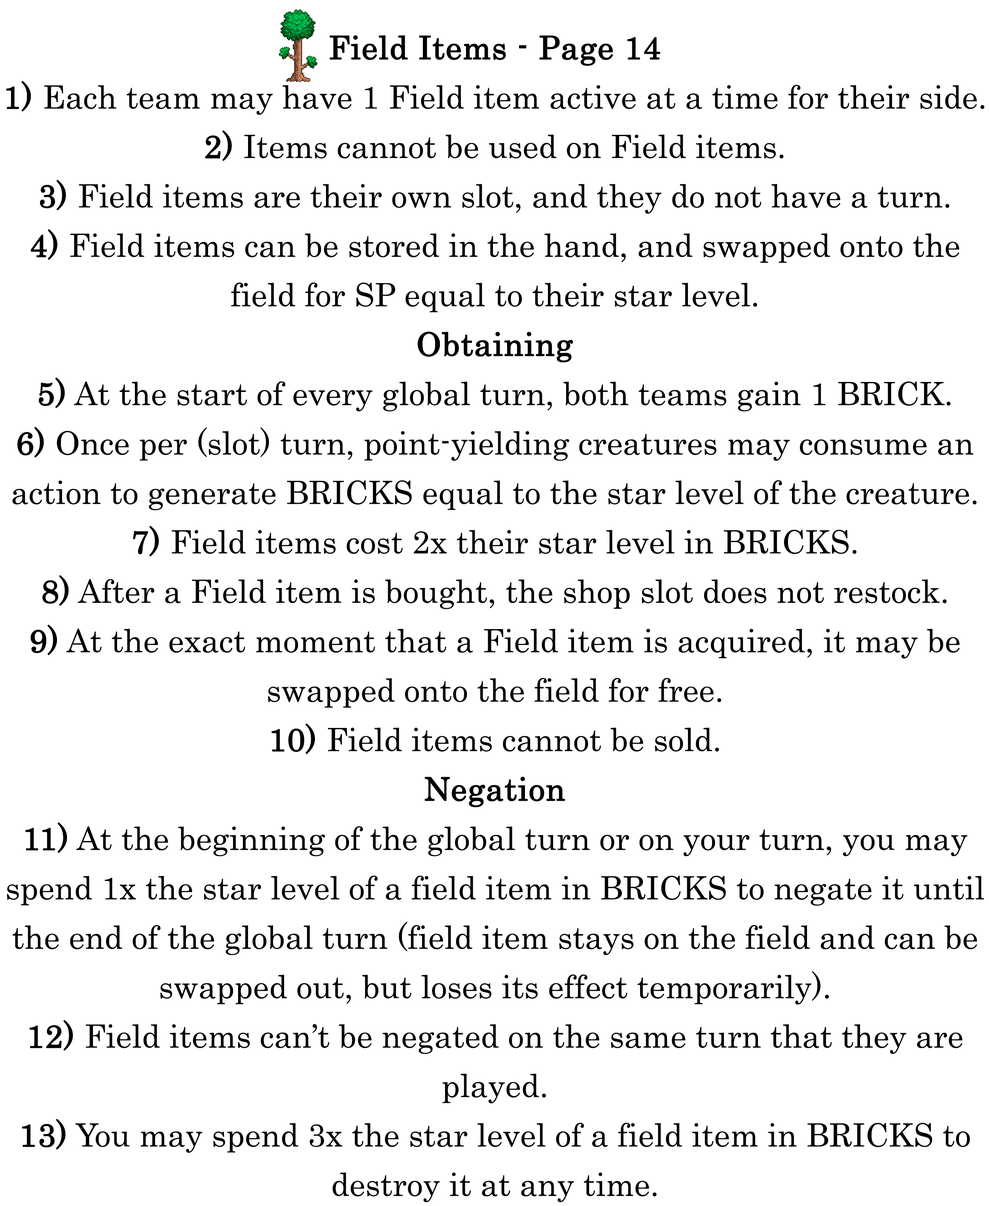
<style>
.page{position:relative;width:989px;height:1206px;background:#ffffff}
.page>*{position:absolute;margin:0}
.t1{font:54.9px/49.4px "Century";color:#000000}
.t2{font:54.9px/49.4px "Century";color:#000000;font-weight:bold}
</style>
<div class="page">
<p class="t1" style="left:6px;top:35px;width:978px;height:1168px;text-align:center"><span class="t2">Field Items - Page 14<br>1)</span> Each team may have 1 Field item active at a time for their side.<br><span class="t2">2)</span> Items cannot be used on Field items.<br><span class="t2">3)</span> Field items are their own slot, and they do not have a turn.<br><span class="t2">4)</span> Field items can be stored in the hand, and swapped onto the field for SP equal to their star level.<br><span class="t2">Obtaining<br>5)</span> At the start of every global turn, both teams gain 1 BRICK.<br><span class="t2">6)</span> Once per (slot) turn, point-yielding creatures may consume an action to generate BRICKS equal to the star level of the creature.<br><span class="t2">7)</span> Field items cost 2x their star level in BRICKS.<br><span class="t2">8)</span> After a Field item is bought, the shop slot does not restock.<br><span class="t2">9)</span> At the exact moment that a Field item is acquired, it may be swapped onto the field for free.<br><span class="t2">10)</span> Field items cannot be sold.<br><span class="t2">Negation<br>11)</span> At the beginning of the global turn or on your turn, you may spend 1x the star level of a field item in BRICKS to negate it until the end of the global turn (field item stays on the field and can be swapped out, but loses its effect temporarily).<br><span class="t2">12)</span> Field items can’t be negated on the same turn that they are played.<br><span class="t2">13)</span> You may spend 3x the star level of a field item in BRICKS to destroy it at any time.</p>
</div>
